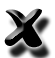
<style>
.page{position:relative;width:55px;height:58px;background:#ffffff}
.page>*{position:absolute;margin:0}
.t1{font:80px "ForteMT";color:#000000}
</style>
<div class="page">
<p class="t1" style="left:4px;top:8px;width:38px;height:40px">x</p>
</div>
